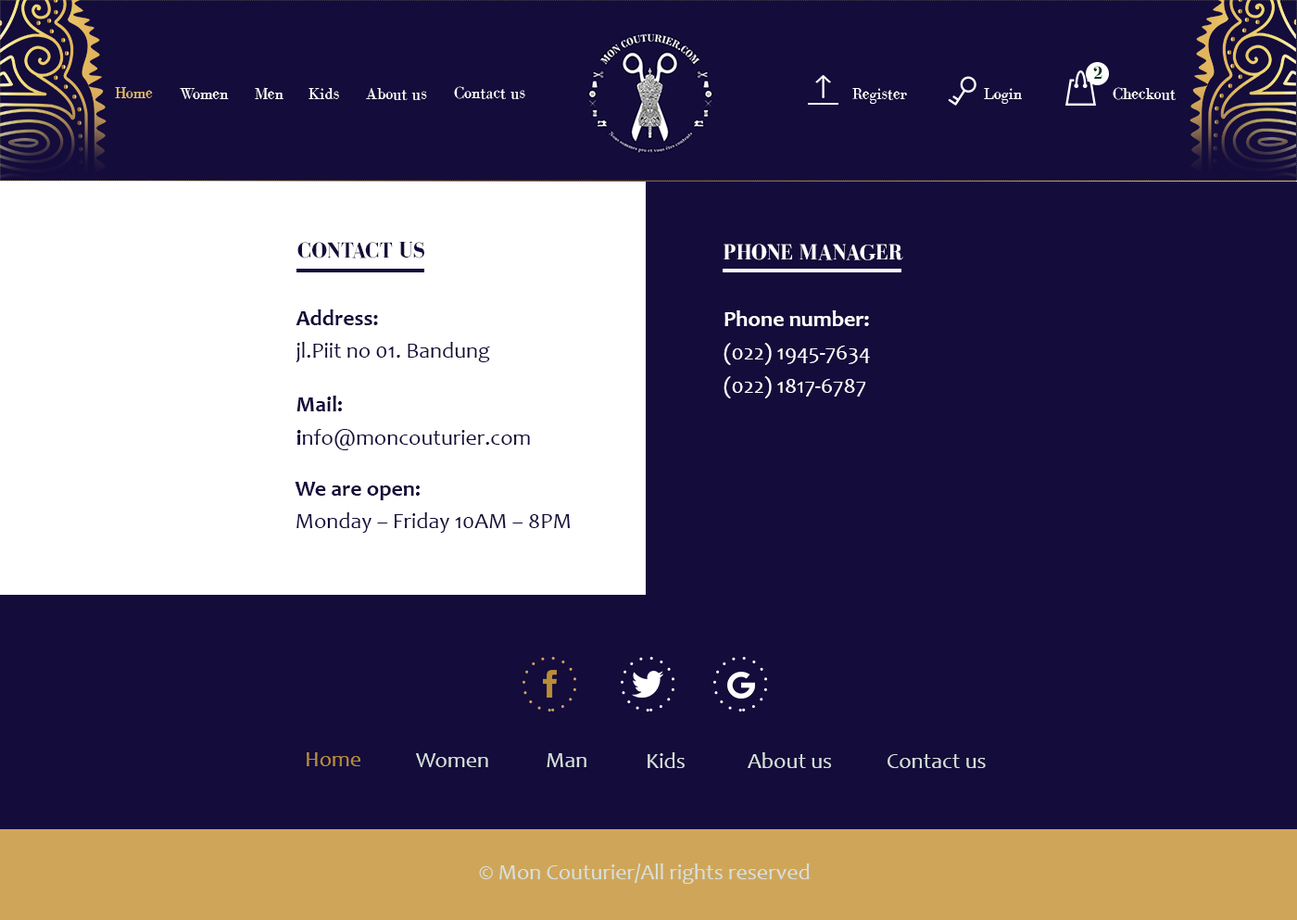
<style>
.page{position:relative;width:1297px;height:920px;background:#140c3b}
.page>*{position:absolute;margin:0}
.t1{font:18.5px "BodoniFLF-Bold";color:#0b311c}
.t2{font:16.7px "BodoniFLF-Roman";color:#e5bd62}
.t3{font:16.7px "BodoniFLF-Roman";color:#ffffff}
.t4{font:22.2px "BodoniFLF-Bold";color:#140c3b;text-transform:uppercase}
.t5{font:22.2px "BodoniFLF-Bold";color:#ffffff;text-transform:uppercase}
.t6{font:22.2px/33.3px "Candara";color:#140c3b}
.t7{font:22.2px/33.3px "Candara-Bold";color:#140c3b}
.t8{font:22.2px/33.3px "Candara";color:#ffffff}
.t9{font:22.2px/33.3px "Candara-Bold";color:#ffffff}
.t10{font:22.2px "Candara";color:#b78c3a}
.t11{font:22.2px "Candara";color:#d7e1dc}
</style>
<div class="page">
<p class="t1" style="left:1093px;top:66px;width:9px;height:13px">2</p>
<p class="t2" style="left:115px;top:87px;width:38px;height:11px">Home</p>
<p class="t3" style="left:180px;top:88px;width:49px;height:11px">Women</p>
<p class="t3" style="left:255px;top:87px;width:28px;height:12px">Men</p>
<p class="t3" style="left:308px;top:88px;width:31px;height:11px">Kids</p>
<p class="t3" style="left:366px;top:88px;width:61px;height:12px">About us</p>
<p class="t3" style="left:454px;top:86px;width:71px;height:13px">Contact us</p>
<p class="t3" style="left:852px;top:88px;width:55px;height:16px">Register</p>
<p class="t3" style="left:984px;top:88px;width:38px;height:16px">Login</p>
<p class="t3" style="left:1112px;top:87px;width:63px;height:13px">Checkout</p>
<p class="t4" style="left:297px;top:242px;width:127px;height:16px">contact us</p>
<p class="t5" style="left:723px;top:244px;width:180px;height:16px">phone manager</p>
<p class="t6" style="left:295px;top:309px;width:195px;height:53px"><span class="t7">Address:<br></span>jl.Piit no 01. Bandung</p>
<p class="t8" style="left:723px;top:310px;width:147px;height:88px"><span class="t9">Phone number:<br></span>(022) 1945-7634<br>(022) 1817-6787</p>
<p class="t6" style="left:296px;top:395px;width:234px;height:55px"><span class="t7">Mail:<br>i</span>nfo@moncouturier.com</p>
<p class="t6" style="left:295px;top:482px;width:276px;height:51px"><span class="t7">We are open:<br></span>Monday – Friday 10AM – 8PM</p>
<p class="t10" style="left:307px;top:752px;width:53px;height:14px">Home</p>
<p class="t11" style="left:416px;top:753px;width:72px;height:14px">Women</p>
<p class="t11" style="left:546px;top:753px;width:40px;height:14px">Man</p>
<p class="t11" style="left:647px;top:752px;width:37px;height:16px">Kids</p>
<p class="t11" style="left:747px;top:752px;width:84px;height:16px">About us</p>
<p class="t11" style="left:887px;top:754px;width:98px;height:14px">Contact us</p>
<p class="t11" style="left:479px;top:863px;width:330px;height:21px">© Mon Couturier/All rights reserved</p>
</div>
